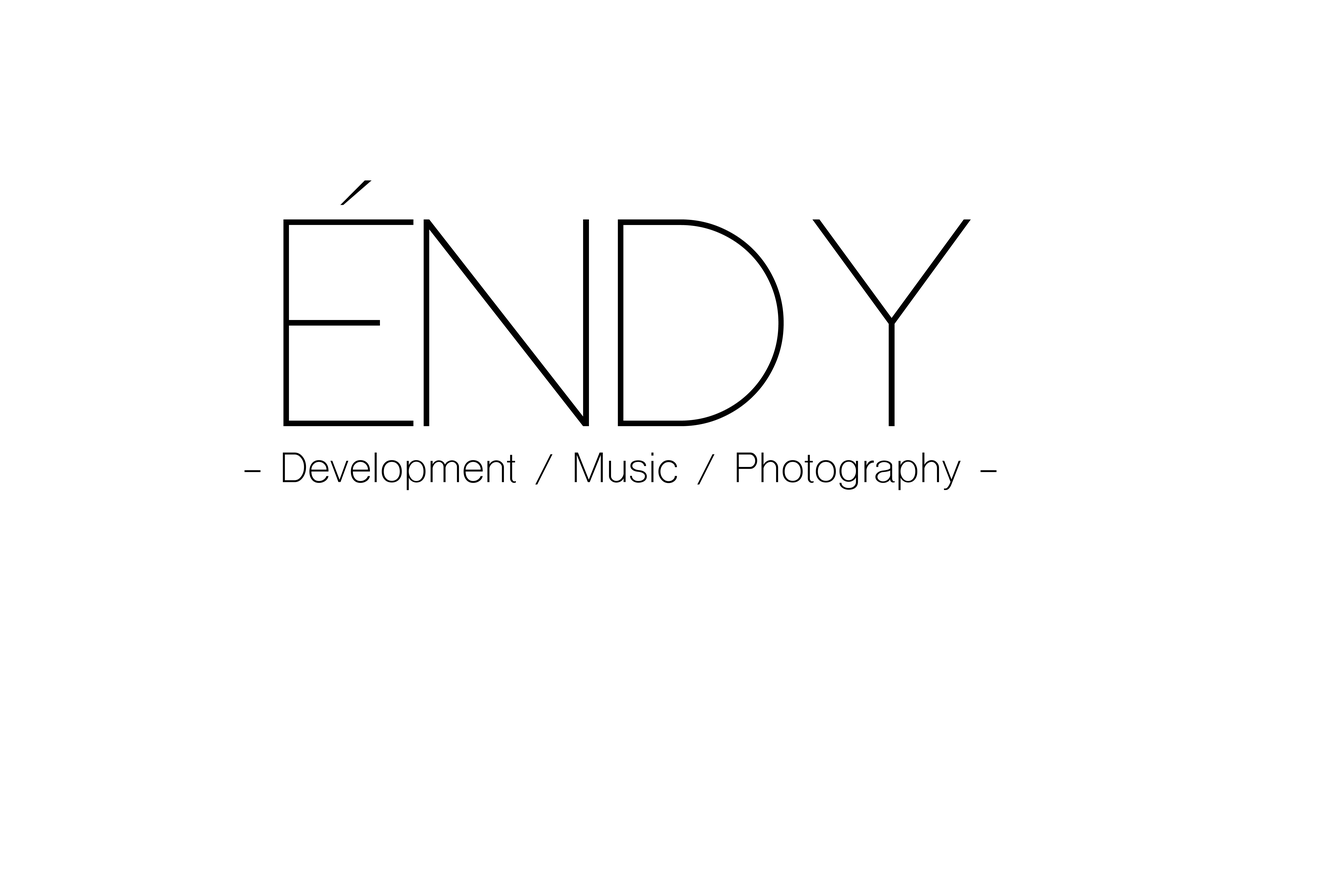
<style>
.page{position:relative;width:1337px;height:892px;background:#ffffff}
.page>*{position:absolute;margin:0}
.t1{font:288.9px "Neou-Thin";color:#000000}
.t2{font:40.2px "ShreeDev0714";color:#000000}
</style>
<div class="page">
<p class="t1" style="left:284px;top:180px;width:687px;height:246px">ÉNDY</p>
<p class="t2" style="left:245px;top:452px;width:752px;height:38px">- Development / Music / Photography -</p>
</div>
